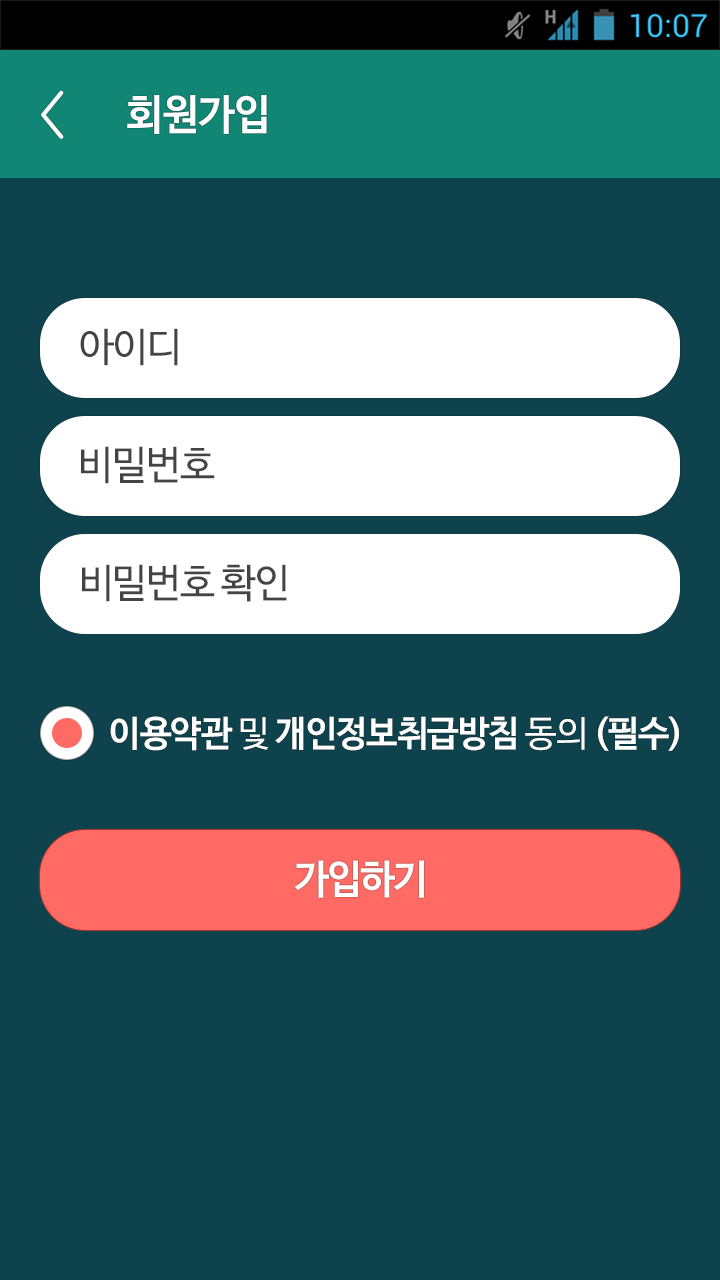
<style>
.page{position:relative;width:720px;height:1280px;background:#0e434d}
.page>*{position:absolute;margin:0}
.t1{font:42px "NanumBarunGothicOTFBold";letter-spacing:-0.02em;color:#ffffff}
.t2{font:40px "NanumBarunGothicOTF";letter-spacing:-0.03em;color:#444444}
.t3{font:36px "NanumBarunGothicOTFBold";letter-spacing:-0.03em;color:#ffffff}
.t4{font:36px "NanumBarunGothicOTF";letter-spacing:-0.03em;color:#ffffff}
.t5{font:40px "NanumBarunGothicOTFBold";letter-spacing:-0.05em;color:#ffffff}
</style>
<div class="page">
<p class="t1" style="left:127px;top:95px;width:140px;height:39px">회원가입</p>
<p class="t2" style="left:80px;top:328px;width:98px;height:38px">아이디</p>
<p class="t2" style="left:81px;top:446px;width:134px;height:38px">비밀번호</p>
<p class="t2" style="left:82px;top:564px;width:205px;height:38px">비밀번호 확인</p>
<p class="t3" style="left:110px;top:716px;width:569px;height:35px">이용약관<span class="t4"> 및 </span>개인정보취급방침 <span class="t4">동의 </span>(필수)</p>
<p class="t5" style="left:294px;top:860px;width:130px;height:38px">가입하기</p>
</div>
